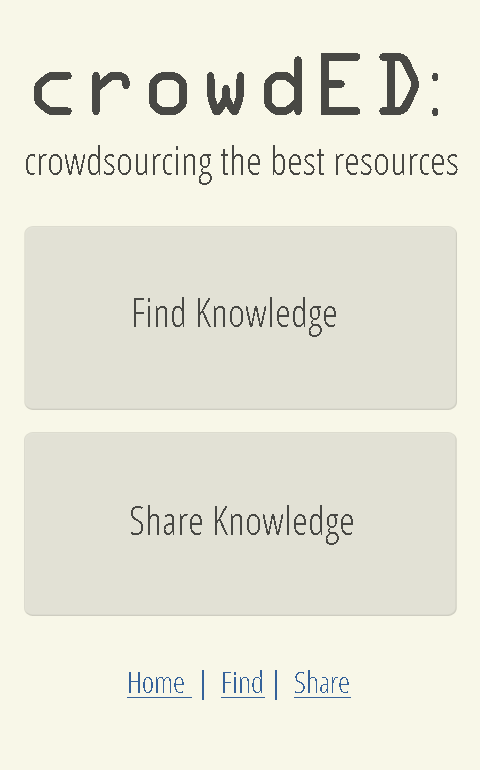
<style>
.page{position:relative;width:480px;height:770px;background:#f8f7e8}
.page>*{position:absolute;margin:0}
.t1{font:40px/60px "OpenSans-CondensedLight";color:#484844}
.t2{font:80px/60px "OCRAStd";color:#484844}
.t3{font:80px/60px "OpenSans-CondensedLight";color:#484844}
.t4{font:40px "OpenSans-CondensedLight";color:#484844}
.t5{font:30px "OpenSans-CondensedLight";color:#35629a;text-decoration:underline}
.t6{font:30px "OpenSans-CondensedLight";color:#35629a}
</style>
<div class="page">
<p class="t1" style="left:26px;top:53px;width:432px;height:132px"><span class="t2">crowdED</span><span class="t3">: <br></span>crowdsourcing the best resources</p>
<p class="t4" style="left:134px;top:297px;width:202px;height:40px">Find Knowledge</p>
<p class="t4" style="left:131px;top:505px;width:222px;height:40px">Share Knowledge</p>
<p class="t5" style="left:127px;top:670px;width:224px;height:30px">Home <span class="t6"> |  </span>Find<span class="t6"> |  </span>Share</p>
</div>
